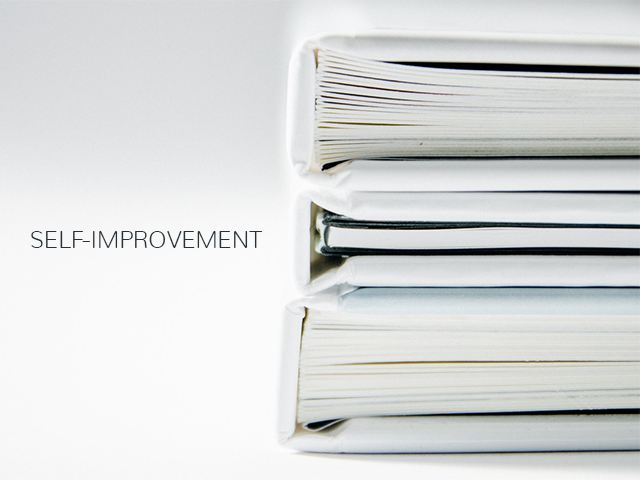
<style>
.page{position:relative;width:640px;height:480px}
.page>*{position:absolute;margin:0}
.t1{font:24px "Nunito-ExtraLight";color:#263238}
</style>
<div class="page">
<p class="t1" style="left:31px;top:231px;width:231px;height:17px">SELF-IMPROVEMENT</p>
</div>
